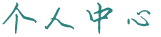
<style>
.page{position:relative;width:161px;height:37px;background:#ffffff}
.page>*{position:absolute;margin:0}
.t1{font:40px "ÊéÌå·»°²¾°³¼¸Ö±ÊÐÐÊé";color:#2c837e}
</style>
<div class="page">
<p class="t1" style="left:2px;top:2px;width:149px;height:32px">个人中心</p>
</div>
